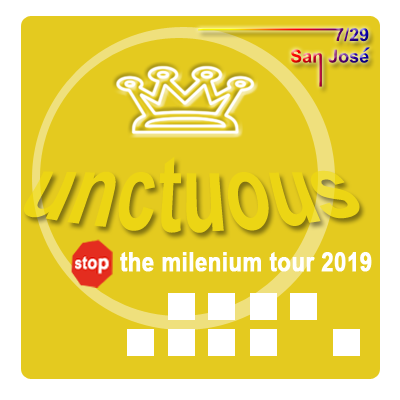
<style>
.page{position:relative;width:400px;height:400px;background:#e4ca1f}
.page>*{position:absolute;margin:0}
.t1{font:89.1px "Arial-BoldMT";color:#f1dc0c;scale:0.73 1}
.t2{font:26.4px "Arial-BoldMT";color:#ffffff;font-weight:bold;scale:0.83 1}
</style>
<div class="page">
<p class="t1" style="left:23px;top:156px;width:337px;height:77px;opacity:0.59">unctuous</p>
<p class="t2" style="left:120px;top:252px;width:252px;height:20px">the milenium tour 2019</p>
</div>
